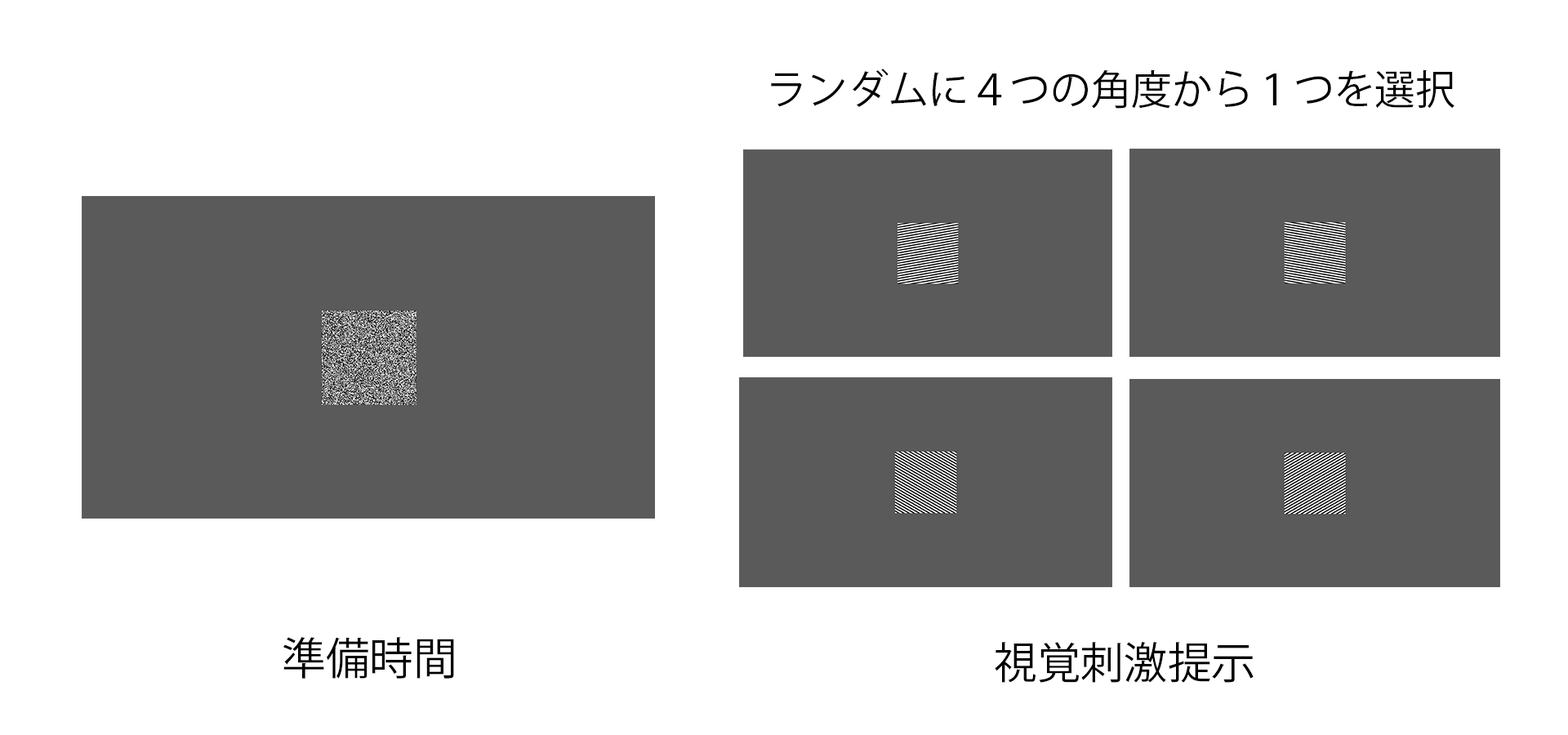
<style>
.page{position:relative;width:1568px;height:735px;background:#ffffff}
.page>*{position:absolute;margin:0}
.t1{font:40.8px "KozGoPr6N-Regular";color:#000000}
.t2{font:44.2px "KozGoPr6N-Regular";color:#000000}
.t3{font:43.5px "KozGoPr6N-Regular";color:#000000}
</style>
<div class="page">
<p class="t1" style="left:771px;top:69px;width:683px;height:40px">ランダムに４つの角度から１つを選択</p>
<p class="t2" style="left:283px;top:637px;width:171px;height:42px">準備時間</p>
<p class="t3" style="left:995px;top:641px;width:259px;height:42px">視覚刺激提示</p>
</div>
